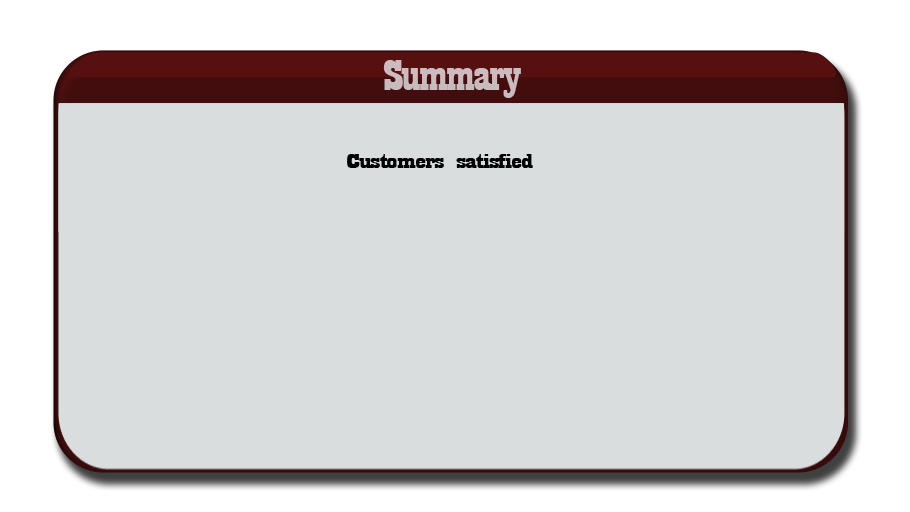
<style>
.page{position:relative;width:910px;height:512px;background:#daddde}
.page>*{position:absolute;margin:0}
.t1{font:44.6px "Playbill";letter-spacing:-0.025em;color:#c8bbbe;scale:1.61 1}
.t2{font:21px "Playbill";letter-spacing:-0.025em;color:#020200;scale:2.24 1}
</style>
<div class="page">
<p class="t1" style="left:383px;top:60px;width:138px;height:38px">Summary</p>
<p class="t2" style="left:347px;top:154px;width:186px;height:14px">Customers satisfied</p>
</div>
